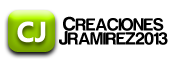
<style>
.page{position:relative;width:180px;height:60px;background:#ffffff}
.page>*{position:absolute;margin:0}
.t1{font:18px/14px "Harabara";color:#000000}
.t2{font:20px/14px "Harabara";color:#000000}
.t3{font:29px "KhmerUI-Bold";color:#ffffff}
</style>
<div class="page">
<p class="t1" style="left:59px;top:16px;width:109px;height:29px;text-align:center"><span class="t2">C</span>REACIONES<br><span class="t2">J</span>RAMIREZ2013</p>
<p class="t3" style="left:17px;top:21px;width:29px;height:22px">CJ</p>
</div>
